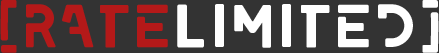
<style>
.page{position:relative;width:439px;height:53px;background:#333333}
.page>*{position:absolute;margin:0}
.t1{font:60px "LEIXO-Bold";color:#ffffff}
.t2{font:60px "LEIXO-Bold";color:#b41919}
</style>
<div class="page">
<p class="t1" style="left:0px;top:0px;width:439px;height:53px"><span class="t2">[RATE</span>LIMITED]</p>
</div>
